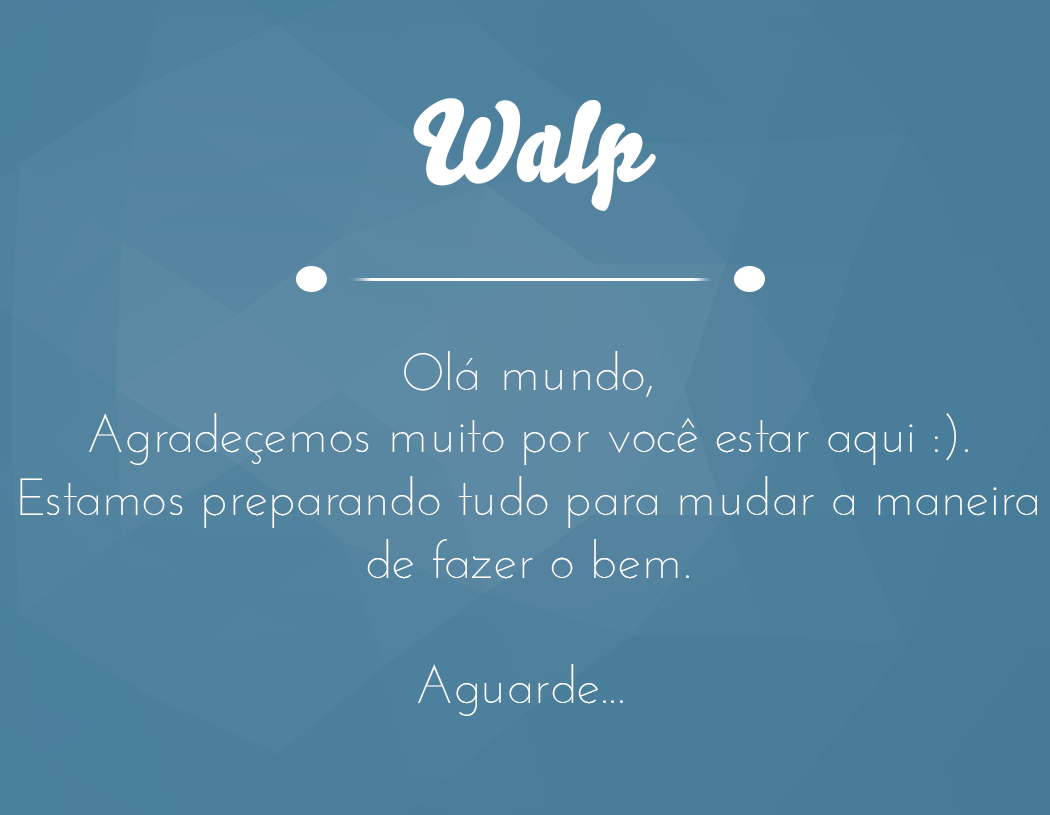
<style>
.page{position:relative;width:1050px;height:815px}
.page>*{position:absolute;margin:0}
.t1{font:111.9px "Bello-Pro";color:#ffffff}
.t2{font:52.2px "JosefinSans-Light";color:#ffffff}
</style>
<div class="page">
<p class="t1" style="left:413px;top:98px;width:243px;height:113px">Walp</p>
<p class="t2" style="left:20px;top:351px;width:1017px;height:365px;text-align:center">Olá mundo,<br>Agradeçemos muito por você estar aqui :).<br>Estamos preparando tudo para mudar a maneira<br>de fazer o bem.<br><br>Aguarde...</p>
</div>
